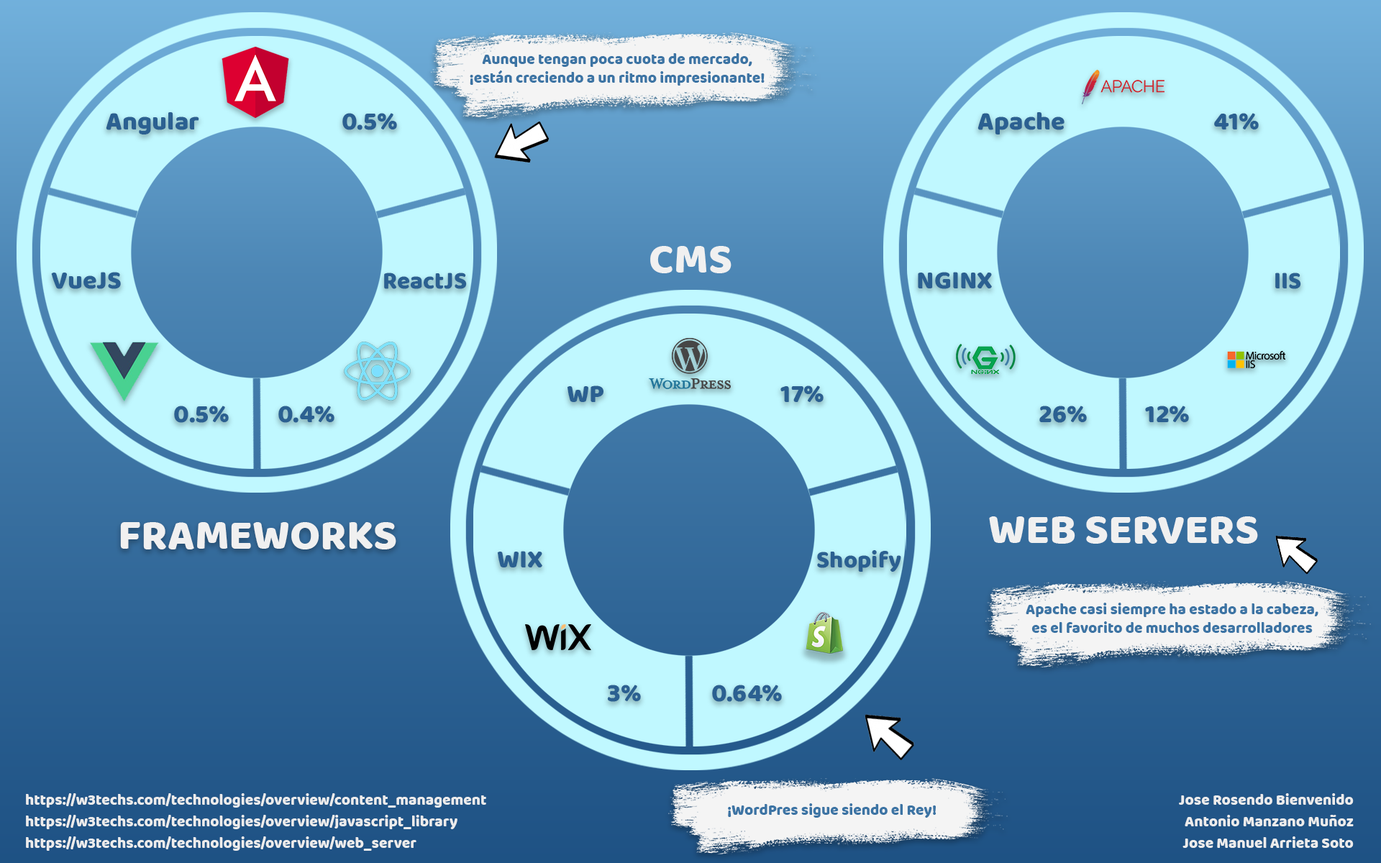
<style>
.page{position:relative;width:1381px;height:863px;background:#c0f8ff}
.page>*{position:absolute;margin:0}
.t1{font:15.1px "BalooTammudu2-ExtraBold";color:#3c74a4}
.t2{font:25.9px "BalooTammudu2-ExtraBold";color:#2b6091}
.t3{font:43.2px "BalooTammudu2-ExtraBold";color:#f0f0f0}
.t4{font:23.7px "BalooTammudu2-ExtraBold";color:#2b6091}
.t5{font:15.1px "BalooTammudu2-ExtraBold";color:#ececec}
</style>
<div class="page">
<p class="t1" style="left:470px;top:53px;width:295px;height:33px;text-align:center">Aunque tengan poca cuota de mercado,<br>¡están creciendo a un ritmo impresionante!</p>
<p class="t2" style="left:106px;top:112px;width:93px;height:23px">Angular</p>
<p class="t2" style="left:342px;top:113px;width:55px;height:17px">0.5%</p>
<p class="t2" style="left:978px;top:112px;width:87px;height:23px">Apache</p>
<p class="t2" style="left:1214px;top:113px;width:45px;height:16px">41%</p>
<p class="t3" style="left:650px;top:246px;width:82px;height:27px">CMS</p>
<p class="t2" style="left:51px;top:272px;width:70px;height:17px">VueJS</p>
<p class="t4" style="left:384px;top:273px;width:83px;height:16px">ReactJS</p>
<p class="t2" style="left:918px;top:272px;width:74px;height:17px">NGINX</p>
<p class="t4" style="left:1276px;top:273px;width:25px;height:16px">IIS</p>
<p class="t2" style="left:567px;top:386px;width:37px;height:16px">WP</p>
<p class="t2" style="left:781px;top:386px;width:43px;height:16px">17%</p>
<p class="t2" style="left:174px;top:406px;width:55px;height:17px">0.5%</p>
<p class="t2" style="left:278px;top:406px;width:57px;height:17px">0.4%</p>
<p class="t2" style="left:1040px;top:406px;width:47px;height:17px">26%</p>
<p class="t2" style="left:1145px;top:406px;width:44px;height:16px">12%</p>
<p class="t3" style="left:989px;top:517px;width:269px;height:27px">WEB SERVERS</p>
<p class="t3" style="left:120px;top:522px;width:276px;height:28px">FRAMEWORKS</p>
<p class="t2" style="left:497px;top:551px;width:45px;height:17px">WIX</p>
<p class="t4" style="left:817px;top:550px;width:84px;height:22px">Shopify</p>
<p class="t1" style="left:1026px;top:603px;width:293px;height:30px;text-align:center">Apache casi siempre ha estado a la cabeza,<br>es el favorito de muchos desarrolladores</p>
<p class="t2" style="left:607px;top:685px;width:34px;height:17px">3%</p>
<p class="t2" style="left:712px;top:685px;width:70px;height:17px">0.64%</p>
<p class="t5" style="left:26px;top:794px;width:460px;height:14px">https://w3techs.com/technologies/overview/content_management</p>
<p class="t5" style="left:1179px;top:794px;width:175px;height:11px">Jose Rosendo Bienvenido</p>
<p class="t1" style="left:728px;top:804px;width:209px;height:14px">¡WordPres sigue siendo el Rey!</p>
<p class="t5" style="left:26px;top:815px;width:432px;height:14px">https://w3techs.com/technologies/overview/javascript_library</p>
<p class="t5" style="left:1185px;top:815px;width:169px;height:12px">Antonio Manzano Muñoz</p>
<p class="t5" style="left:26px;top:837px;width:391px;height:14px">https://w3techs.com/technologies/overview/web_server</p>
<p class="t5" style="left:1183px;top:837px;width:171px;height:11px">Jose Manuel Arrieta Soto</p>
</div>
